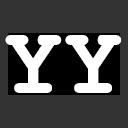
<style>
.page{position:relative;width:128px;height:128px;background:#333333}
.page>*{position:absolute;margin:0}
.t1{font:100px "CourierNewPS-BoldMT";color:#ffffff}
</style>
<div class="page">
<p class="t1" style="left:5px;top:35px;width:117px;height:58px">YY</p>
</div>
